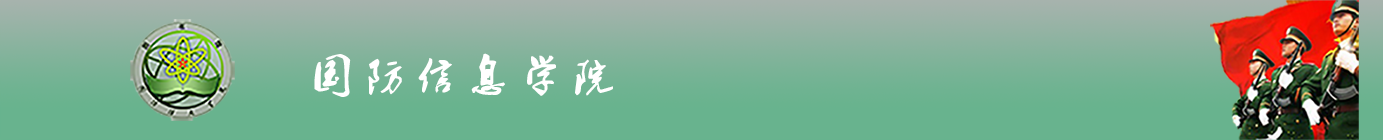
<style>
.page{position:relative;width:1383px;height:140px;background:#68b38e}
.page>*{position:absolute;margin:0}
.t1{font:39.4px "2.0-";color:#ffffff}
</style>
<div class="page">
<p class="t1" style="left:314px;top:53px;width:299px;height:44px">国 防 信 息 学 院</p>
</div>
